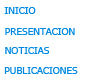
<style>
.page{position:relative;width:88px;height:82px;background:#ffffff}
.page>*{position:absolute;margin:0}
.t1{font:10px "pophtaw4";color:#0089e1}
</style>
<div class="page">
<p class="t1" style="left:4px;top:7px;width:32px;height:7px">INICIO</p>
<p class="t1" style="left:5px;top:28px;width:70px;height:7px">PRESENTACION</p>
<p class="t1" style="left:5px;top:47px;width:45px;height:7px">NOTICIAS</p>
<p class="t1" style="left:4px;top:67px;width:74px;height:7px">PUBLICACIONES</p>
</div>
